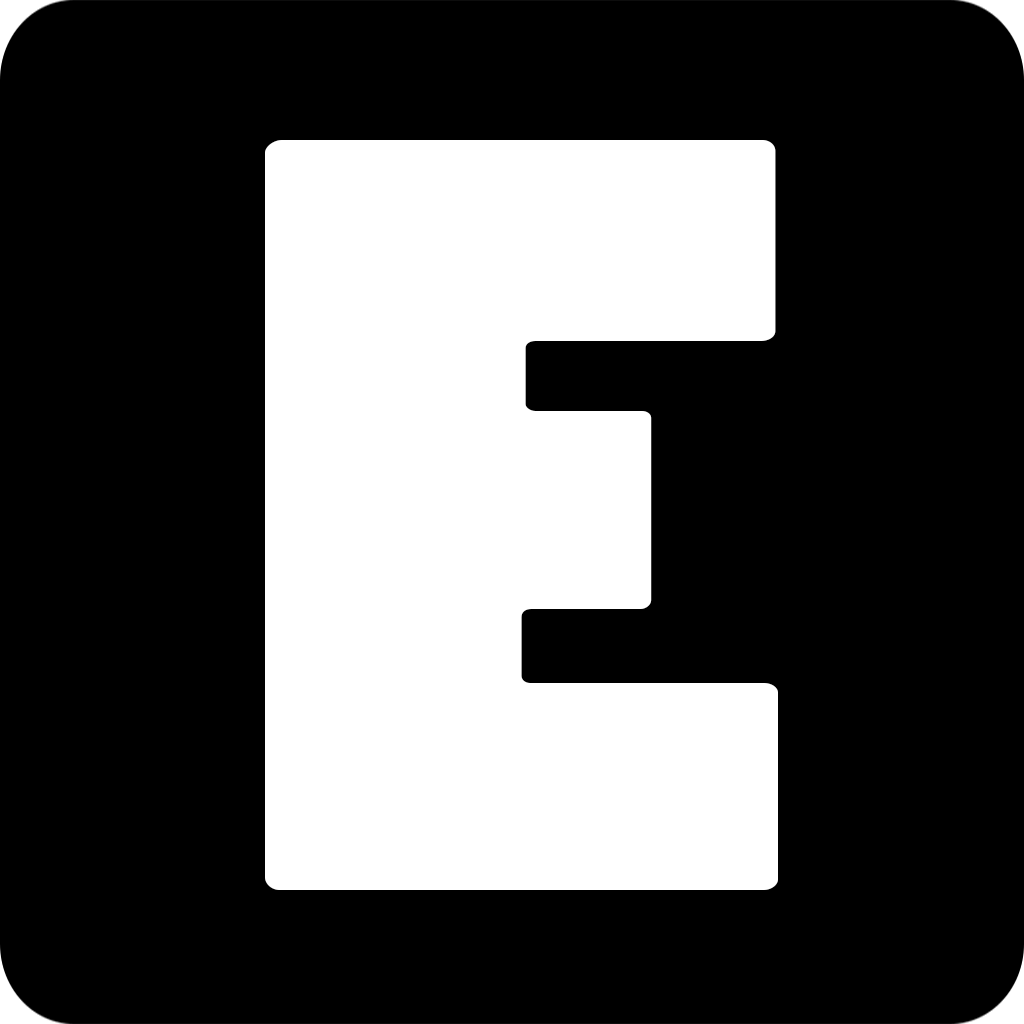
<style>
.page{position:relative;width:1024px;height:1024px;background:#000000}
.page>*{position:absolute;margin:0}
.t1{font:1000px "PoplarStd";color:#ffffff;scale:1.35 1}
</style>
<div class="page">
<p class="t1" style="left:265px;top:140px;width:513px;height:750px">E</p>
</div>
